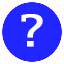
<style>
.page{position:relative;width:64px;height:64px;background:#2126ff}
.page>*{position:absolute;margin:0}
.t1{font:44.4px "LucidaConsole";color:#ffffff;font-weight:bold}
</style>
<div class="page">
<p class="t1" style="left:21px;top:14px;width:22px;height:33px">?</p>
</div>
